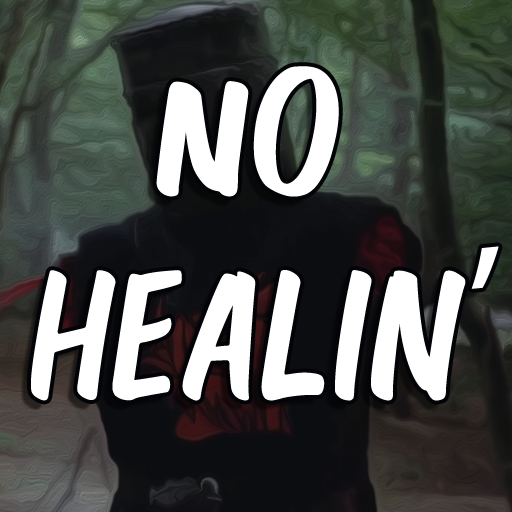
<style>
.page{position:relative;width:512px;height:512px}
.page>*{position:absolute;margin:0}
.t1{font:170px "Velcro";color:#ffffff}
.t2{font:170px "MyriadPro-Regular";color:#ffffff}
</style>
<div class="page">
<p class="t1" style="left:31px;top:66px;width:435px;height:335px;text-align:center">nO HEALING</p>
<p class="t2" style="left:471px;top:246px;width:28px;height:43px">,</p>
</div>
